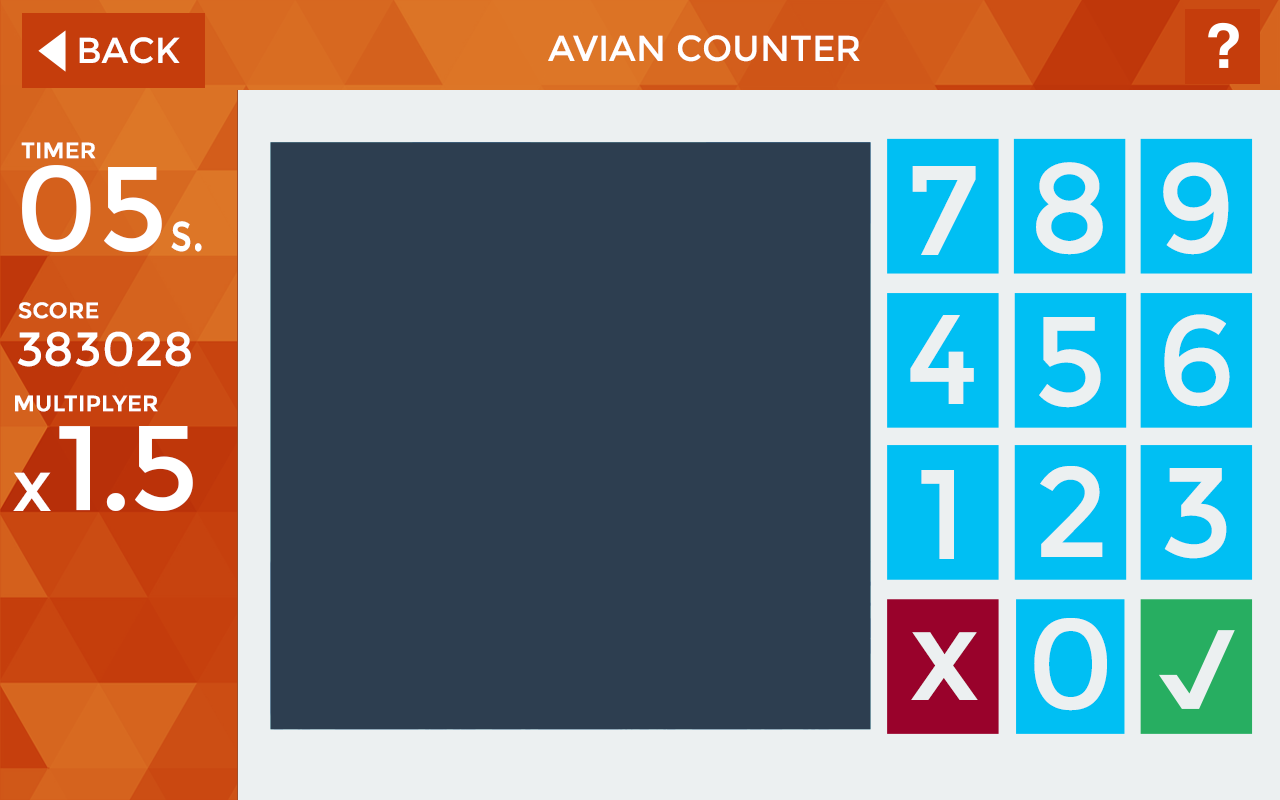
<style>
.page{position:relative;width:1280px;height:800px;background:#2d3e50}
.page>*{position:absolute;margin:0}
.t1{font:36px "Montserrat-Regular";color:#ffffff}
.t2{font:36px "Montserrat-Regular";color:#ffffff;text-transform:uppercase}
.t3{font:22px "Montserrat-Regular";color:#ffffff;font-weight:bold}
.t4{font:120px "Montserrat-Regular";color:#ffffff}
.t5{font:127.4px "Montserrat-Regular";color:#ecf0f1}
.t6{font:55px "Montserrat-Regular";color:#ffffff;scale:0.8 1}
.t7{font:48px "Montserrat-Regular";color:#ffffff}
.t8{font:120px "Montserrat-Regular";letter-spacing:-0.025em;color:#ffffff}
.t9{font:72px "Montserrat-Regular";color:#ffffff}
</style>
<div class="page">
<p class="t1" style="left:79px;top:37px;width:101px;height:27px">BACK</p>
<p class="t2" style="left:548px;top:35px;width:312px;height:27px">Avian Counter</p>
<p class="t3" style="left:21px;top:142px;width:75px;height:17px">TIMER</p>
<p class="t4" style="left:22px;top:165px;width:140px;height:87px">05</p>
<p class="t5" style="left:912px;top:166px;width:64px;height:89px">7</p>
<p class="t5" style="left:1036px;top:162px;width:67px;height:93px">8</p>
<p class="t5" style="left:1163px;top:162px;width:66px;height:93px">9</p>
<p class="t6" style="left:171px;top:221px;width:31px;height:31px">s.</p>
<p class="t3" style="left:18px;top:302px;width:81px;height:17px">SCORE</p>
<p class="t5" style="left:910px;top:315px;width:64px;height:89px">4</p>
<p class="t5" style="left:1039px;top:317px;width:62px;height:91px">5</p>
<p class="t5" style="left:1164px;top:314px;width:66px;height:93px">6</p>
<p class="t7" style="left:17px;top:331px;width:174px;height:36px">383028</p>
<p class="t3" style="left:15px;top:395px;width:143px;height:17px">MULTIPLYER</p>
<p class="t8" style="left:59px;top:426px;width:134px;height:85px">1.5</p>
<p class="t9" style="left:13px;top:472px;width:38px;height:39px">x</p>
<p class="t5" style="left:921px;top:470px;width:33px;height:89px">1</p>
<p class="t5" style="left:1040px;top:466px;width:63px;height:91px">2</p>
<p class="t5" style="left:1164px;top:468px;width:63px;height:91px">3</p>
<p class="t5" style="left:1034px;top:618px;width:73px;height:93px">0</p>
<p class="t5" style="left:911px;top:632px;width:67px;height:68px">x</p>
</div>
